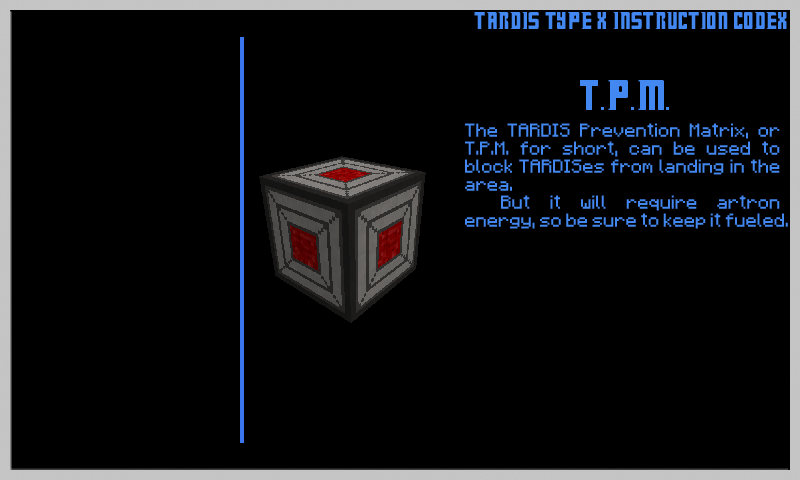
<style>
.page{position:relative;width:800px;height:480px;background:#000000}
.page>*{position:absolute;margin:0}
.t1{font:27px "Doctor-Who";color:#4388f1}
.t2{font:15px "Minecraftia-Regular";color:#4388f1}
.t3{font:48px "Doctor-Who";color:#4388f1}
</style>
<div class="page">
<p class="t1" style="left:474px;top:12px;width:313px;height:17px">TARDIS Type X Instruction Codex</p>
<p class="t2" style="left:465px;top:80px;width:323px;height:149px;text-align:center"><span class="t3">T.P.M.<br></span><br>The TARDIS Prevention Matrix, or T.P.M. for short, can be used to block TARDISes from landing in the area.<br> But it will require artron energy, so be sure to keep it fueled.</p>
</div>
